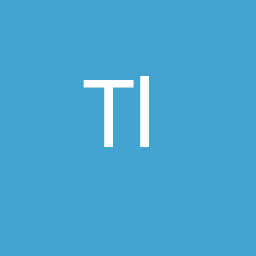
<style>
.page{position:relative;width:256px;height:256px;background:#44a4d1}
.page>*{position:absolute;margin:0}
.t1{font:100px "MyriadPro-Regular";color:#ffffff}
</style>
<div class="page">
<p class="t1" style="left:83px;top:76px;width:66px;height:71px">Tl</p>
</div>
